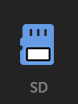
<style>
.page{position:relative;width:78px;height:104px;background:#232323}
.page>*{position:absolute;margin:0}
.t1{font:14px "SegoeUI";color:#7c7c7c;font-weight:bold}
</style>
<div class="page">
<p class="t1" style="left:30px;top:82px;width:18px;height:11px">SD</p>
</div>
